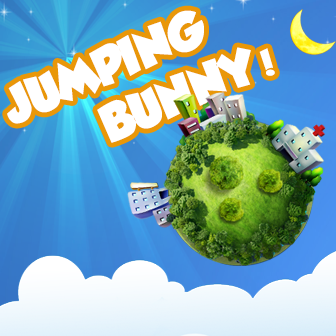
<style>
.page{position:relative;width:336px;height:336px}
.page>*{position:absolute;margin:0}
.t1{font:45.8px "GROBOLD";color:#ffffff}
.t2{font:27.5px "GROBOLD";color:#ffffff}
</style>
<div class="page">
<p class="t1" style="left:7px;top:10px;width:268px;height:133px;rotate:-23deg">JUMPING <br>   BUNNY<span class="t2">!</span></p>
</div>
